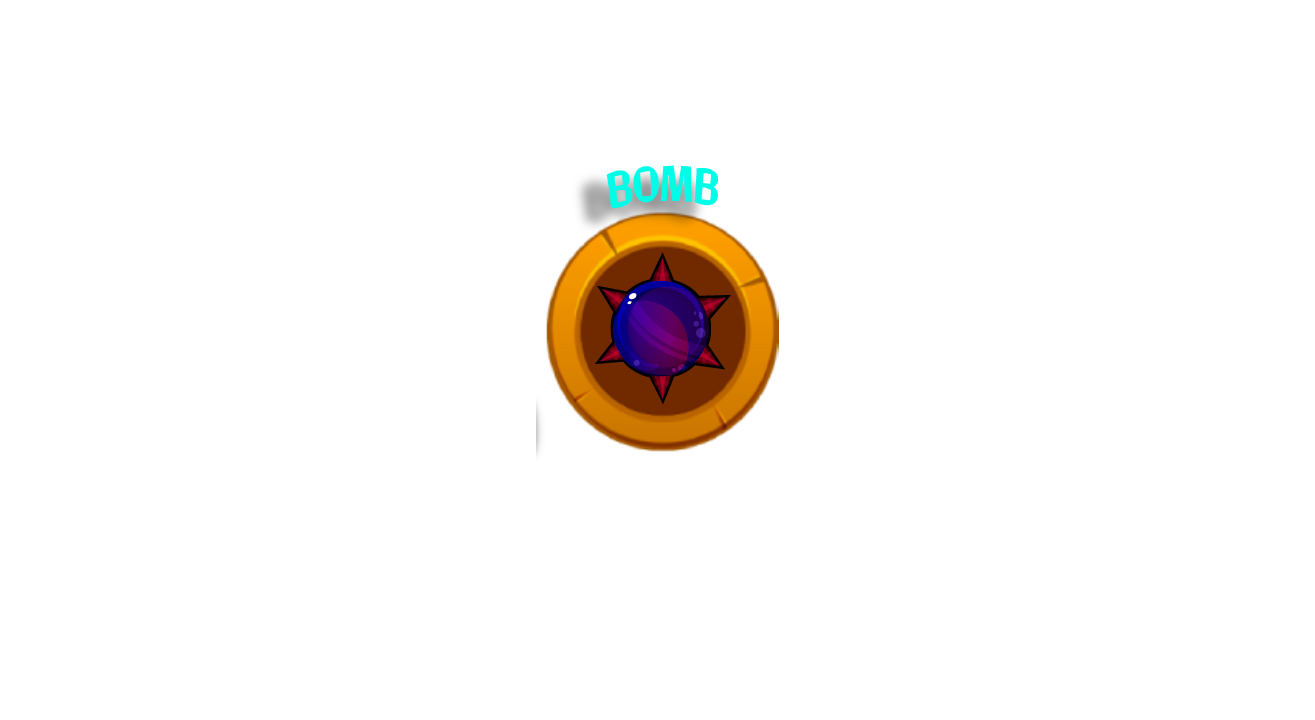
<style>
.page{position:relative;width:1315px;height:720px;background:#ffffff}
.page>*{position:absolute;margin:0}
.t1{font:47.9px "Galindo-Regular";color:#0ffde9;scale:0.71 1}
</style>
<div class="page">
<p class="t1" style="left:606px;top:165px;width:113px;height:43px">BOMB</p>
</div>
